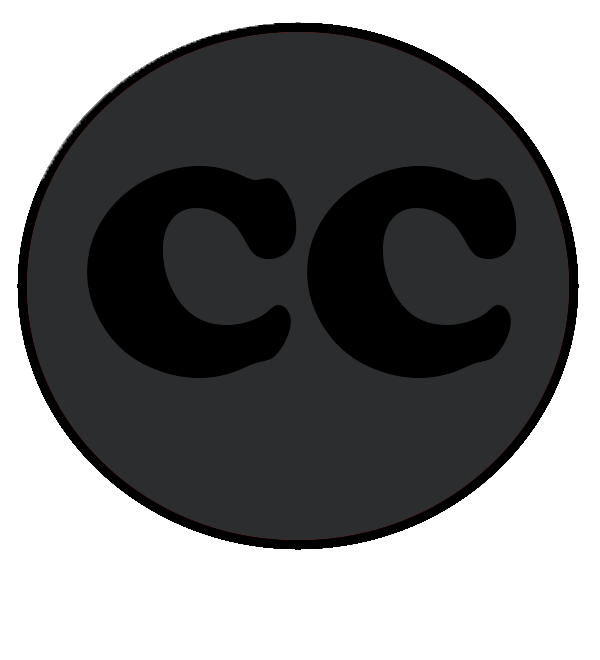
<style>
.page{position:relative;width:600px;height:660px;background:#ffffff}
.page>*{position:absolute;margin:0}
.t1{font:305.7px "CooperBlack";color:#000000}
</style>
<div class="page">
<p class="t1" style="left:87px;top:166px;width:430px;height:212px">CC</p>
</div>
